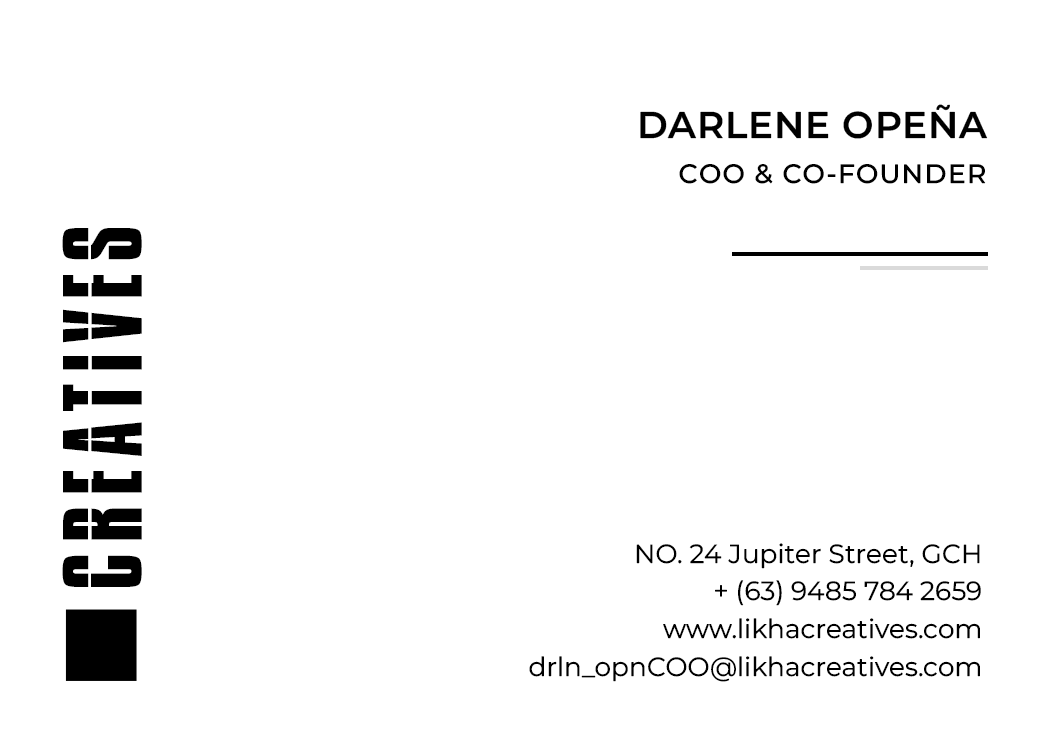
<style>
.page{position:relative;width:1050px;height:750px;background:#ffffff}
.page>*{position:absolute;margin:0}
.t1{font:37.2px "MontserratRoman-SemiBold";letter-spacing:0.025em;color:#000000}
.t2{font:26.5px "MontserratRoman-Medium";letter-spacing:0.05em;color:#000000}
.t3{font:97px "Impossible-0";letter-spacing:0.1em;color:#000000}
.t4{font:26.2px/37.7px "MontserratRoman-Regular";letter-spacing:0.005em;color:#000000}
</style>
<div class="page">
<p class="t1" style="left:640px;top:104px;width:348px;height:35px">DARLENE OPEÑA</p>
<p class="t2" style="left:679px;top:164px;width:307px;height:20px">COO &amp; CO-FOUNDER</p>
<p class="t3" style="left:62px;top:228px;width:80px;height:359px;rotate:-90deg">CREATIVES</p>
<p class="t4" style="left:529px;top:543px;width:452px;height:139px;text-align:right">NO. 24 Jupiter Street, GCH<br>+ (63) 9485 784 2659<br>www.likhacreatives.com<br>drln_opnCOO@likhacreatives.com</p>
</div>
